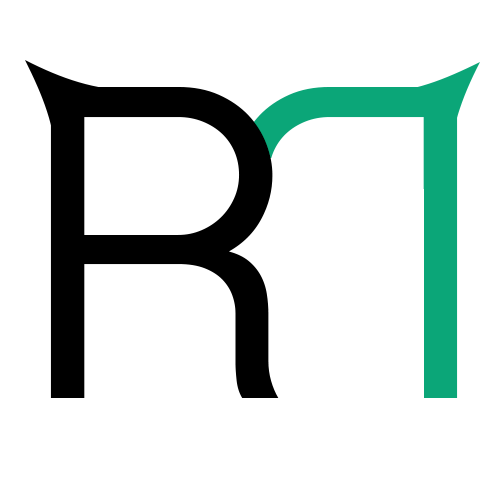
<style>
.page{position:relative;width:500px;height:500px;background:#ffffff}
.page>*{position:absolute;margin:0}
.t1{font:450px "GurmukhiSangamMN";color:#000000}
</style>
<div class="page">
<p class="t1" style="left:50px;top:87px;width:229px;height:311px">R</p>
</div>
